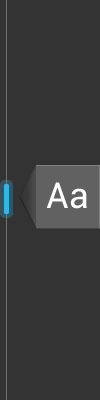
<style>
.page{position:relative;width:100px;height:400px;background:#333333}
.page>*{position:absolute;margin:0}
.t1{font:36px "Roboto-Regular";color:#ffffff}
</style>
<div class="page">
<p class="t1" style="left:46px;top:182px;width:41px;height:27px">Aa</p>
</div>
